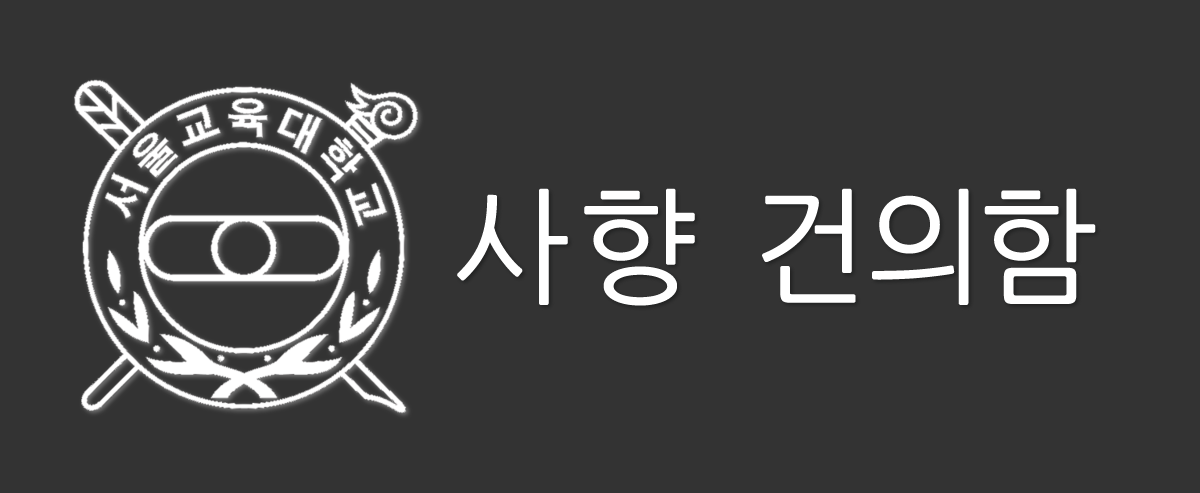
<style>
.page{position:relative;width:1200px;height:493px;background:#333333}
.page>*{position:absolute;margin:0}
.t1{font:125px "NanumGothic";letter-spacing:0.1em;color:#ffffff;font-weight:bold}
</style>
<div class="page">
<p class="t1" style="left:457px;top:188px;width:639px;height:118px">사향 건의함</p>
</div>
